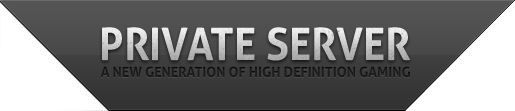
<style>
.page{position:relative;width:515px;height:111px;background:#ffffff}
.page>*{position:absolute;margin:0}
.t1{font:44.8px "Aller-Bold";text-transform:uppercase;scale:0.94 1}
.t2{font:14px "Aller-Bold";color:#212121;text-transform:uppercase}
</style>
<div class="page">
<p class="t1" style="left:102px;top:27px;width:309px;height:34px">PRIVATE SERVER</p>
<p class="t2" style="left:101px;top:66px;width:309px;height:12px">A NEW GENERATION OF HIGH DEFINITION GAMING</p>
</div>
